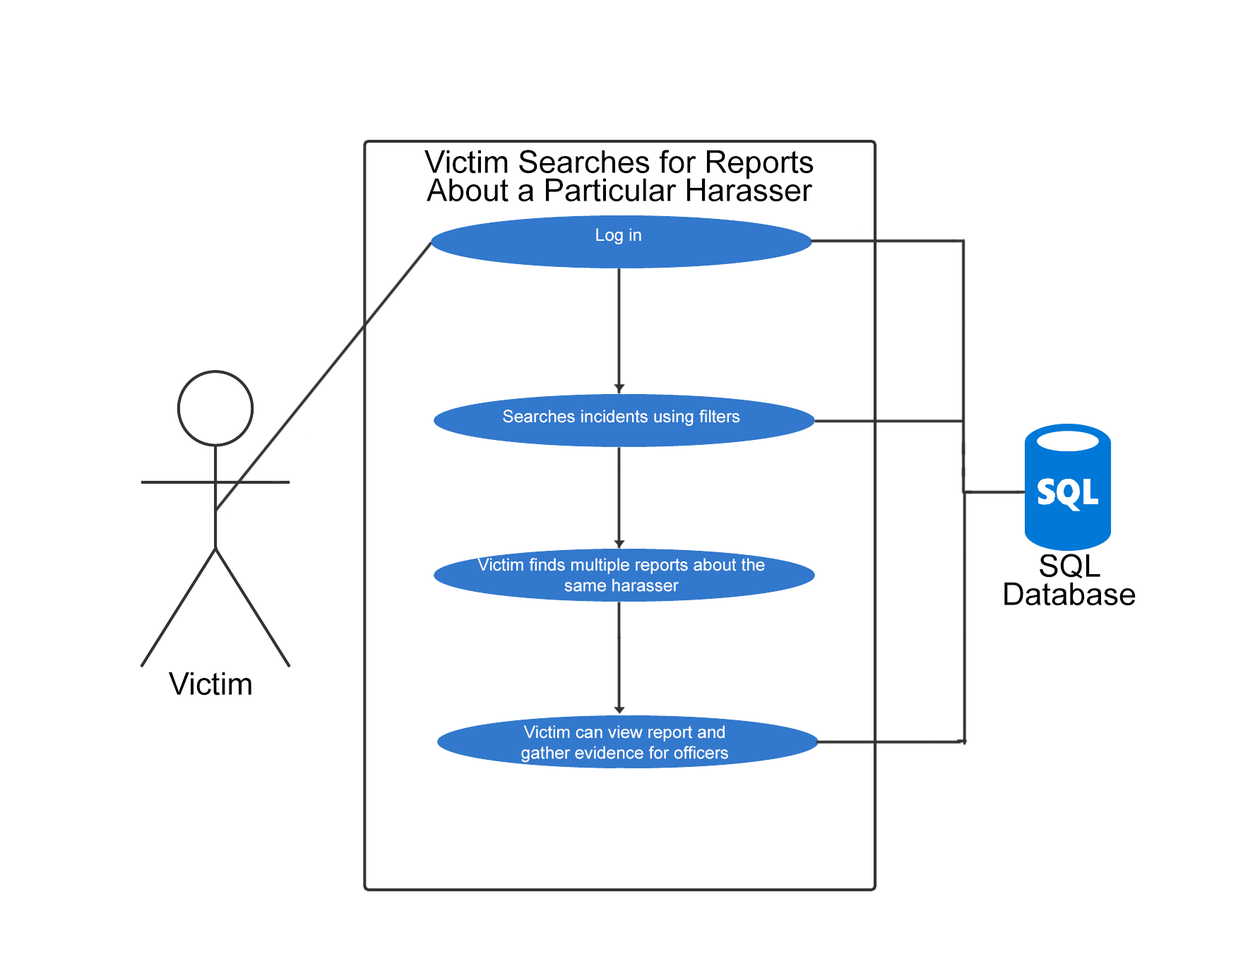
<style>
.page{position:relative;width:1243px;height:959px;background:#ffffff}
.page>*{position:absolute;margin:0}
.t1{font:31.4px/28.3px "ArialMT";color:#000000}
.t2{font:17.3px "ArialMT";color:#ffffff}
.t3{font:31.4px "ArialMT";color:#000000}
</style>
<div class="page">
<p class="t1" style="left:425px;top:150px;width:389px;height:52px;text-align:center">Victim Searches for Reports<br>About a Particular Harasser</p>
<p class="t2" style="left:596px;top:228px;width:45px;height:16px">Log in</p>
<p class="t2" style="left:503px;top:410px;width:237px;height:16px">Searches incidents using filters</p>
<p class="t1" style="left:1004px;top:554px;width:132px;height:52px;text-align:center">SQL<br>Database</p>
<p class="t2" style="left:477px;top:558px;width:288px;height:34px;text-align:center">Victim finds multiple reports about the<br>same harasser</p>
<p class="t3" style="left:168px;top:672px;width:83px;height:24px">Victim</p>
<p class="t2" style="left:521px;top:725px;width:207px;height:38px;text-align:center">Victim can view report and <br>gather evidence for officers</p>
</div>
